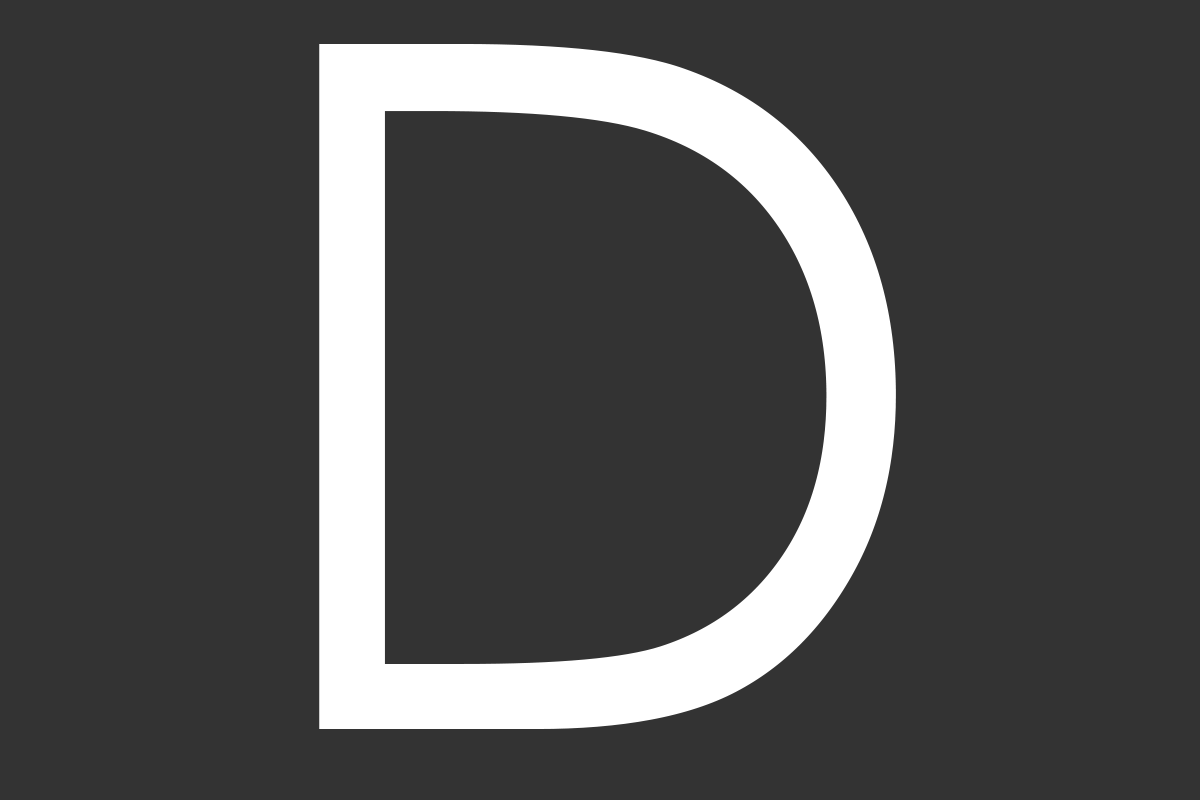
<style>
.page{position:relative;width:1200px;height:800px;background:#333333}
.page>*{position:absolute;margin:0}
.t1{font:952.6px "CenturyGothic";color:#ffffff}
</style>
<div class="page">
<p class="t1" style="left:319px;top:44px;width:577px;height:685px">D</p>
</div>
